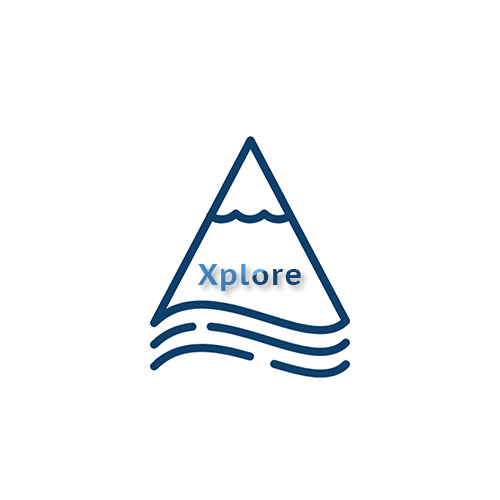
<style>
.page{position:relative;width:500px;height:500px;background:#ffffff}
.page>*{position:absolute;margin:0}
.t1{font:30px "PTSans-CaptionBold";letter-spacing:0.05em}
</style>
<div class="page">
<p class="t1" style="left:197px;top:264px;width:104px;height:27px">Xplore</p>
</div>
